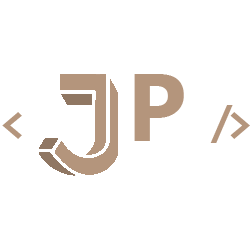
<style>
.page{position:relative;width:250px;height:250px;background:#ffffff}
.page>*{position:absolute;margin:0}
.t1{font:96.3px "SegoeUI-Bold";letter-spacing:-0.2em;color:#b4957c}
.t2{font:48px "Consolas-Bold";letter-spacing:-0.2em;color:#b4957c}
</style>
<div class="page">
<p class="t1" style="left:134px;top:74px;width:50px;height:67px">P</p>
<p class="t2" style="left:2px;top:112px;width:20px;height:27px">&lt;</p>
<p class="t2" style="left:210px;top:105px;width:40px;height:38px">/&gt;</p>
</div>
